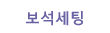
<style>
.page{position:relative;width:110px;height:33px;background:#ffffff}
.page>*{position:absolute;margin:0}
.t1{font:15px "MalgunGothicBold";color:#6861a3}
</style>
<div class="page">
<p class="t1" style="left:26px;top:11px;width:57px;height:15px">보석세팅</p>
</div>
